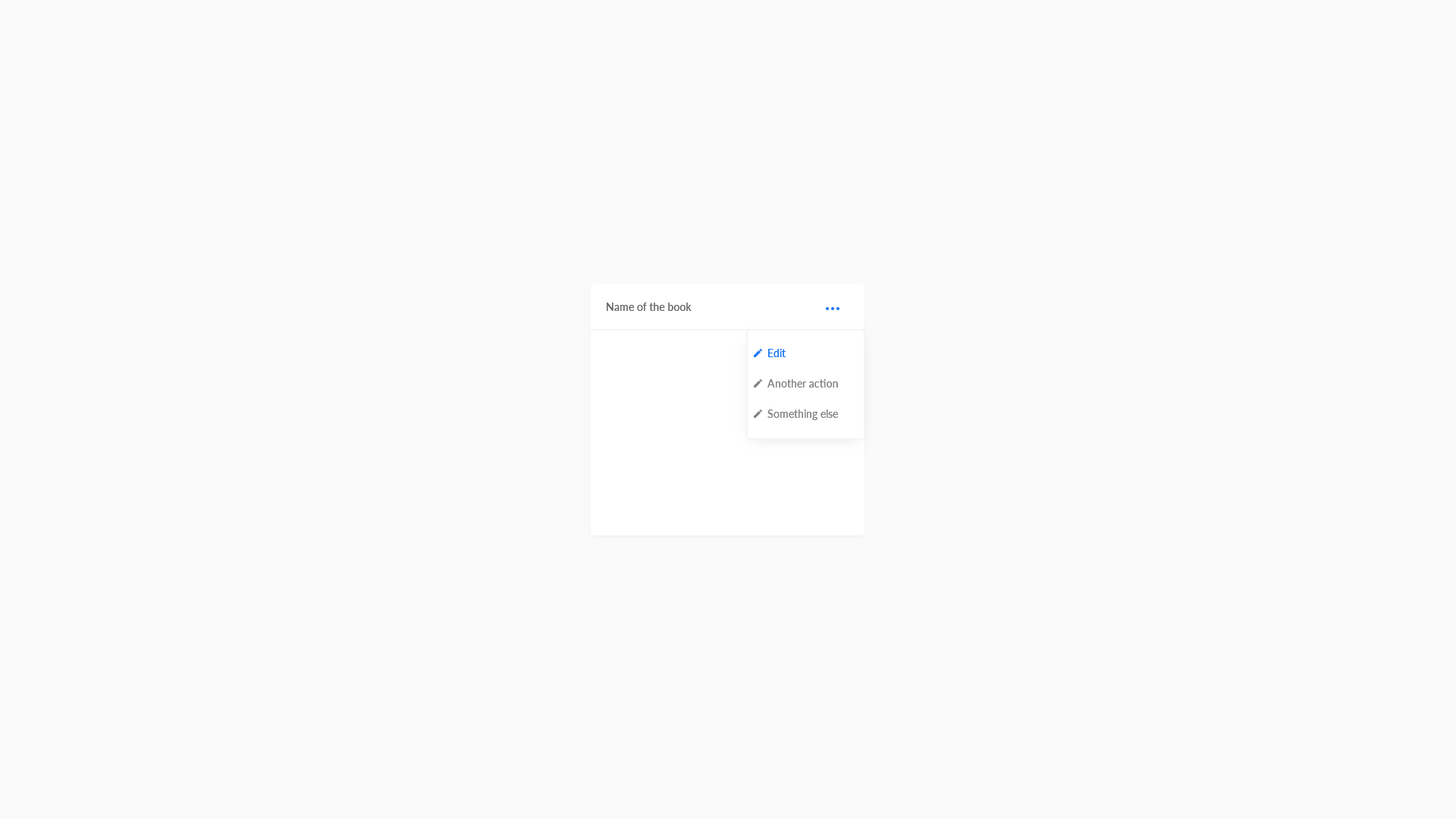
<style>
.page{position:relative;width:1456px;height:819px;background:#fafafa}
.page>*{position:absolute;margin:0}
.t1{font:10.6px "Lato-Medium";color:#666666}
.t2{font:10.6px/30.3px "Lato-Medium";color:#808080}
.t3{font:10.6px/30.3px "Lato-Medium";color:#1875f0}
</style>
<div class="page">
<p class="t1" style="left:607px;top:303px;width:85px;height:8px">Name of the book</p>
<p class="t2" style="left:767px;top:349px;width:71px;height:71px"><span class="t3">Edit<br></span>Another action<br>Something else</p>
</div>
